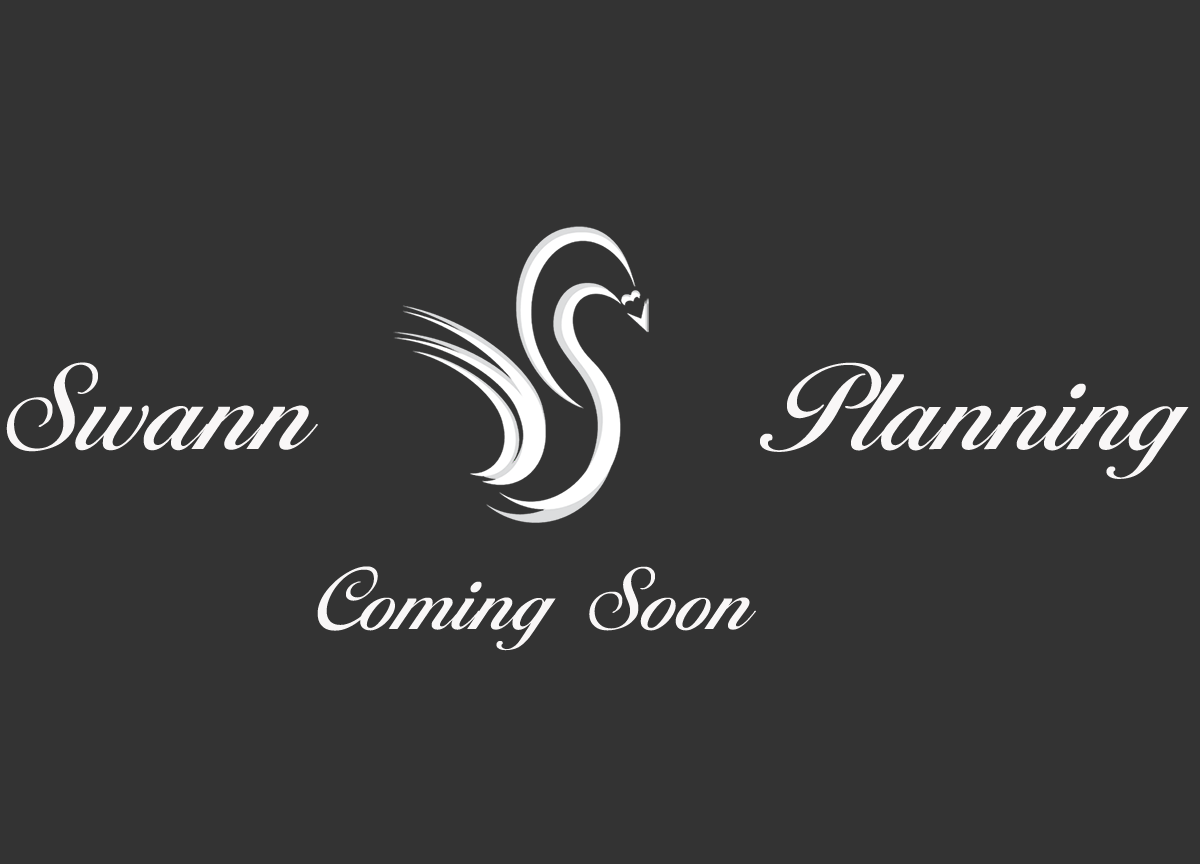
<style>
.page{position:relative;width:1200px;height:864px;background:#333333}
.page>*{position:absolute;margin:0}
.t1{font:166.7px "Ballantines-Serial-Medium-Regular";color:#f9f7f7}
.t2{font:120px "Ballantines-Serial-Medium-Regular";color:#f9f7f7}
</style>
<div class="page">
<p class="t1" style="left:6px;top:362px;width:312px;height:90px">Swann</p>
<p class="t1" style="left:760px;top:362px;width:429px;height:117px">Planning</p>
<p class="t2" style="left:317px;top:566px;width:439px;height:85px">Coming Soon</p>
</div>
